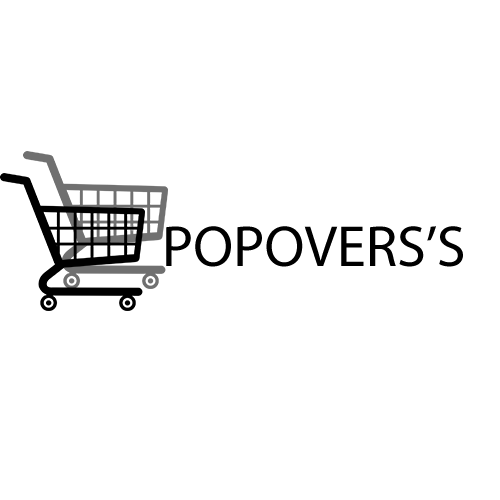
<style>
.page{position:relative;width:500px;height:500px;background:#ffffff}
.page>*{position:absolute;margin:0}
.t1{font:58.3px "MyriadPro-Regular";color:#000000}
</style>
<div class="page">
<p class="t1" style="left:166px;top:226px;width:297px;height:41px">POPOVERS’S</p>
</div>
